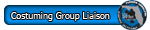
<style>
.page{position:relative;width:150px;height:30px;background:#ffffff}
.page>*{position:absolute;margin:0}
.t1{font:9px "Tahoma";color:#ffffff}
</style>
<div class="page">
<p class="t1" style="left:11px;top:12px;width:99px;height:9px">Costuming Group Liaison</p>
</div>
